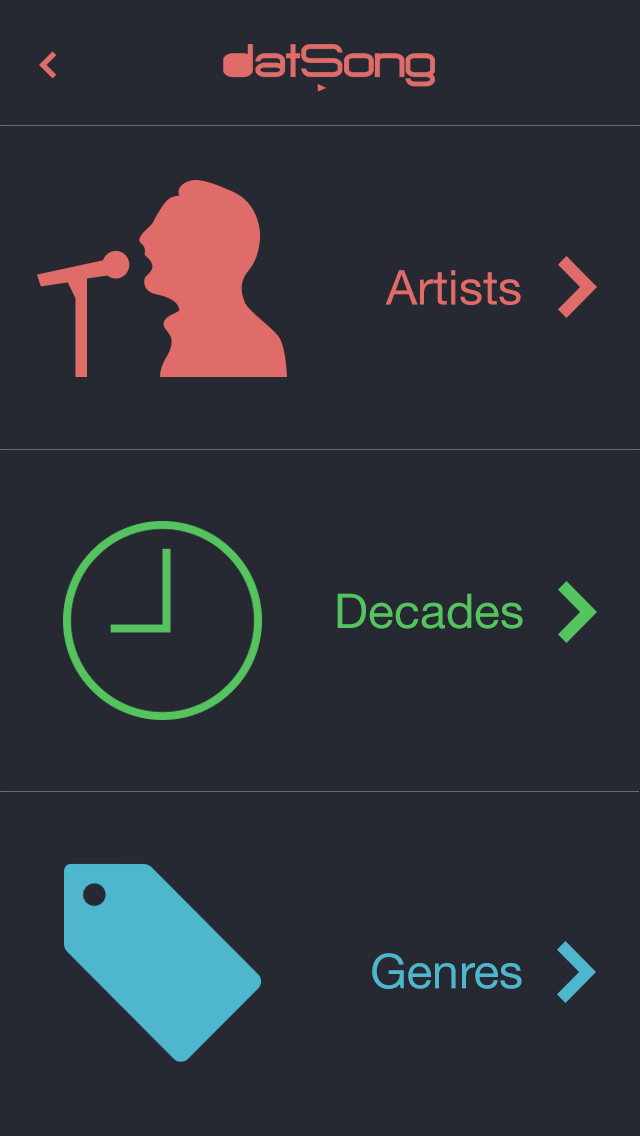
<style>
.page{position:relative;width:640px;height:1136px;background:#272932}
.page>*{position:absolute;margin:0}
.t1{font:48px "HelveticaNeue";color:#e06c69}
.t2{font:48px "HelveticaNeue";color:#55c45f}
.t3{font:48px "HelveticaNeue";color:#4eb7cd}
</style>
<div class="page">
<p class="t1" style="left:385px;top:270px;width:136px;height:35px">Artists</p>
<p class="t2" style="left:337px;top:593px;width:186px;height:36px">Decades</p>
<p class="t3" style="left:372px;top:953px;width:150px;height:36px">Genres</p>
</div>
